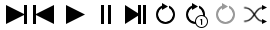
<style>
.page{position:relative;width:270px;height:30px;background:#ffffff}
.page>*{position:absolute;margin:0}
.t1{font:8.7px "MyriadPro-Regular";color:#000000}
</style>
<div class="page">
<p class="t1" style="left:199px;top:19px;width:4px;height:6px">1</p>
</div>
